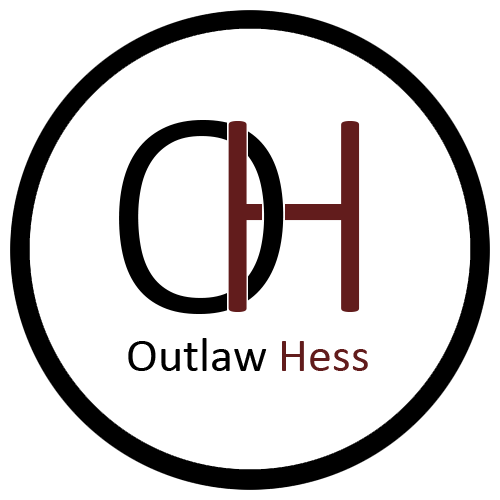
<style>
.page{position:relative;width:500px;height:500px;background:#ffffff}
.page>*{position:absolute;margin:0}
.t1{font:48px "Calibri";color:#000000}
.t2{font:48px "Calibri";color:#621c1c}
</style>
<div class="page">
<p class="t1" style="left:128px;top:338px;width:240px;height:33px">Outlaw <span class="t2">Hess</span></p>
</div>
